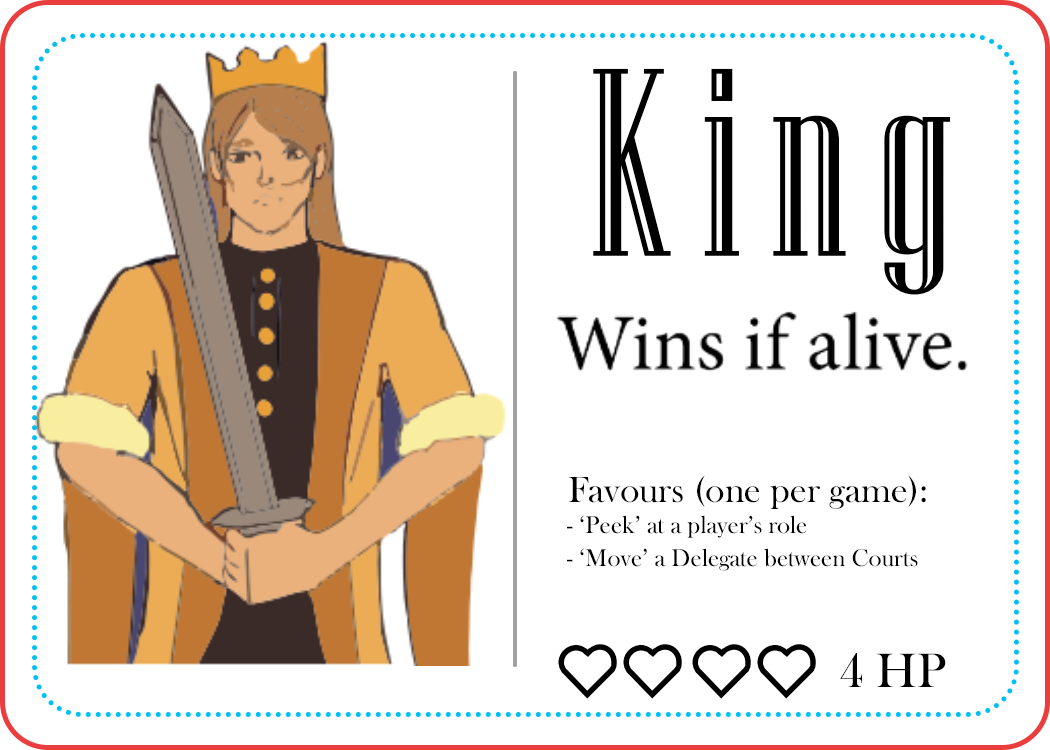
<style>
.page{position:relative;width:1050px;height:750px;background:#ffffff}
.page>*{position:absolute;margin:0}
.t1{font:37.5px "BaskOldFace";color:#000000}
.t2{font:25px/33.3px "BaskOldFace";color:#000000}
.t3{font:50px "BaskOldFace";color:#000000}
</style>
<div class="page">
<p class="t1" style="left:569px;top:475px;width:357px;height:34px">Favours (one per game):</p>
<p class="t2" style="left:567px;top:515px;width:351px;height:56px">- ‘Peek’ at a player’s role<br>- ‘Move’ a Delegate between Courts</p>
<p class="t3" style="left:840px;top:653px;width:106px;height:34px">4 HP</p>
</div>
